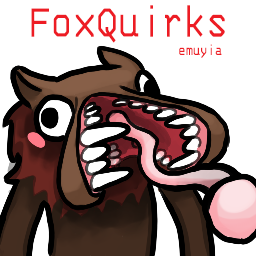
<style>
.page{position:relative;width:256px;height:256px;background:#ffffff}
.page>*{position:absolute;margin:0}
.t1{font:50.9px/16.7px "3270Condensed";color:#ed1c24}
.t2{font:16.7px/16.7px "3270Condensed";color:#ed1c24}
</style>
<div class="page">
<p class="t1" style="left:31px;top:5px;width:194px;height:53px;text-align:right">FoxQuirks<br><span class="t2">emuyia</span></p>
</div>
